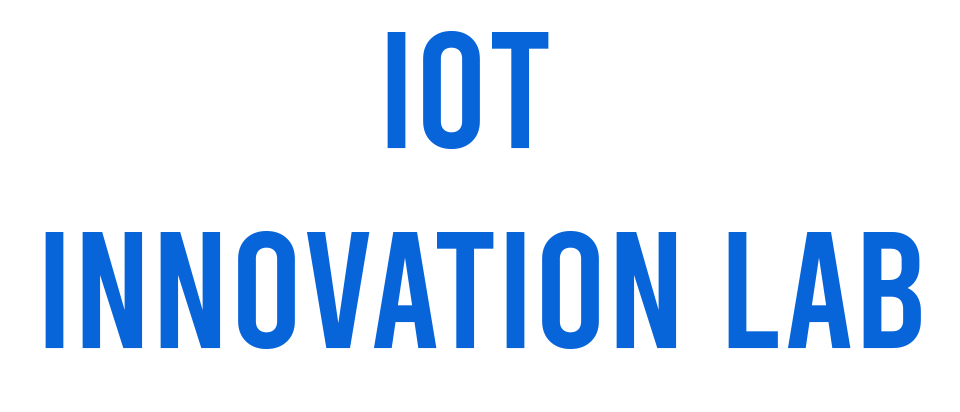
<style>
.page{position:relative;width:960px;height:412px;background:#ffffff}
.page>*{position:absolute;margin:0}
.t1{font:166.7px "Bebas-Regular";color:#0865d9}
</style>
<div class="page">
<p class="t1" style="left:45px;top:31px;width:876px;height:318px;text-align:center">IoT <br>Innovation Lab</p>
</div>
